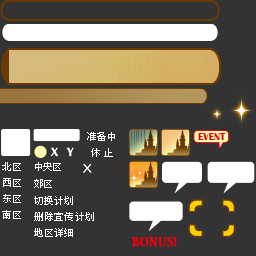
<style>
.page{position:relative;width:256px;height:256px;background:#333333}
.page>*{position:absolute;margin:0}
.t1{font:10px "Zfull-GB";letter-spacing:0.005em;color:#ffffff}
.t2{font:10px "Zfull-GB";letter-spacing:0.345em;color:#ffffff}
.t3{font:10px/16px "Zfull-GB";letter-spacing:0.025em;color:#ffffff}
.t4{font:10px "Zfull-GB";letter-spacing:-0.095em;color:#ffffff}
.t5{font:10px "Zfull-GB";letter-spacing:0.025em;color:#ffffff}
</style>
<div class="page">
<p class="t1" style="left:87px;top:132px;width:28px;height:9px">准备中</p>
<p class="t2" style="left:91px;top:148px;width:22px;height:9px">休止</p>
<p class="t3" style="left:2px;top:162px;width:19px;height:57px">北区<br>西区<br>东区<br>南区</p>
<p class="t4" style="left:35px;top:162px;width:26px;height:9px">中央区</p>
<p class="t4" style="left:34px;top:179px;width:18px;height:9px">郊区</p>
<p class="t5" style="left:34px;top:196px;width:39px;height:9px">切换计划</p>
<p class="t5" style="left:34px;top:212px;width:60px;height:9px">删除宣传计划</p>
<p class="t5" style="left:34px;top:228px;width:39px;height:9px">地区详细</p>
</div>
